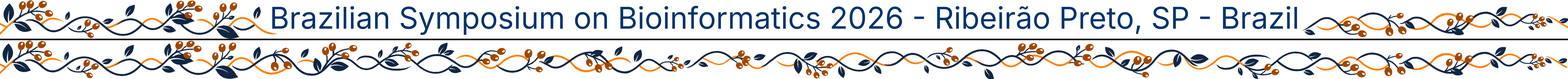
<style>
.page{position:relative;width:1568px;height:79px;background:#ffffff}
.page>*{position:absolute;margin:0}
.t1{font:30px "Inter-Regular";color:#00346e}
</style>
<div class="page">
<p class="t1" style="left:272px;top:6px;width:1025px;height:29px">Brazilian Symposium on Bioinformatics 2026 - Ribeirão Preto, SP - Brazil</p>
</div>
